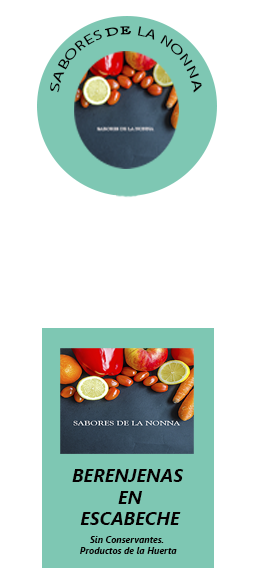
<style>
.page{position:relative;width:255px;height:582px;background:#ffffff}
.page>*{position:absolute;margin:0}
.t1{font:12.6px "MyriadPro-Regular";color:#040000}
.t2{font:12.6px "GoudyOldStyleT-Bold";color:#040000}
.t3{font:18px "SegoeUI-BoldItalic";color:#040000}
.t4{font:9px "SegoeUI-BoldItalic";color:#040000}
</style>
<div class="page">
<p class="t1" style="left:50px;top:26px;width:152px;height:67px">SABORES <span class="t2">DE </span>LA NONNA</p>
<p class="t3" style="left:72px;top:469px;width:112px;height:56px;text-align:center">BERENJENAS <br>EN<br>ESCABECHE</p>
<p class="t4" style="left:80px;top:536px;width:97px;height:18px;text-align:center">Sin Conservantes. <br>Productos de la Huerta</p>
</div>
